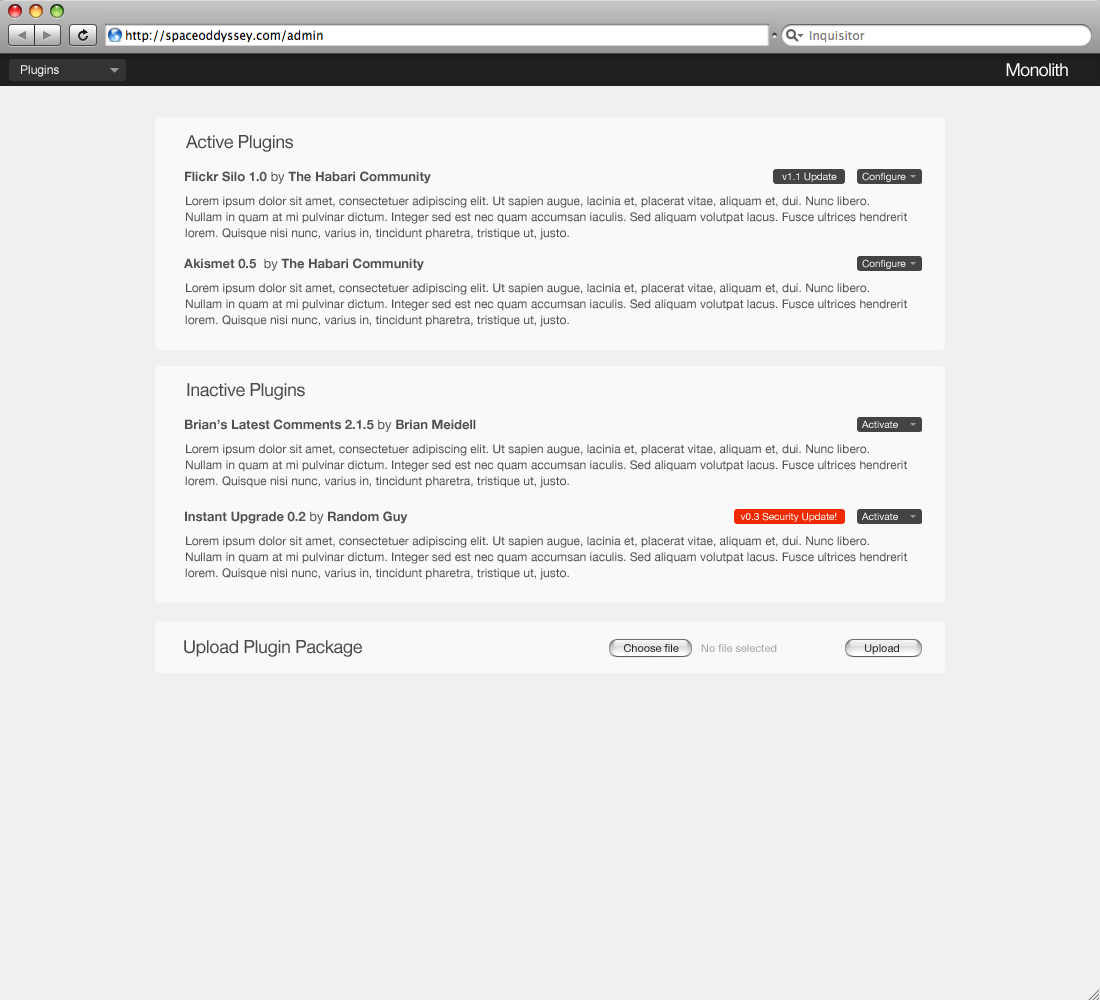
<style>
.page{position:relative;width:1100px;height:1000px;background:#f0f0f0}
.page>*{position:absolute;margin:0}
.t1{font:12px "ArialMT";color:#ffffff}
.t2{font:18px "HelveticaNeue";letter-spacing:-0.05em;color:#ffffff}
.t3{font:18px "HelveticaNeue";letter-spacing:-0.025em;color:#4a4a4a}
.t4{font:13px "HelveticaNeue-Bold";color:#525151}
.t5{font:13px "HelveticaNeue";color:#525151}
.t6{font:10px "HelveticaNeue";color:#ffffff}
.t7{font:12px/16px "HelveticaNeue";color:#525151}
.t8{font:11px "HelveticaNeue";color:#242424}
.t9{font:11px "HelveticaNeue";color:#a4a4a4}
</style>
<div class="page">
<p class="t1" style="left:21px;top:65px;width:38px;height:12px">Plugins</p>
<p class="t2" style="left:1006px;top:63px;width:62px;height:14px">Monolith</p>
<p class="t3" style="left:186px;top:135px;width:107px;height:17px">Active Plugins</p>
<p class="t4" style="left:185px;top:171px;width:246px;height:13px">Flickr Silo 1.0<span class="t5"> by </span>The Habari Community</p>
<p class="t6" style="left:782px;top:172px;width:55px;height:10px">v1.1 Update</p>
<p class="t6" style="left:862px;top:172px;width:44px;height:10px">Configure</p>
<p class="t7" style="left:185px;top:196px;width:722px;height:44px">Lorem ipsum dolor sit amet, consectetuer adipiscing elit. Ut sapien augue, lacinia et, placerat vitae, aliquam et, dui. Nunc libero. Nullam in quam at mi pulvinar dictum. Integer sed est nec quam accumsan iaculis. Sed aliquam volutpat lacus. Fusce ultrices hendrerit lorem. Quisque nisi nunc, varius in, tincidunt pharetra, tristique ut, justo.</p>
<p class="t4" style="left:184px;top:258px;width:240px;height:13px">Akismet 0.5<span class="t5">  by </span>The Habari Community</p>
<p class="t6" style="left:862px;top:259px;width:44px;height:10px">Configure</p>
<p class="t7" style="left:185px;top:283px;width:722px;height:44px">Lorem ipsum dolor sit amet, consectetuer adipiscing elit. Ut sapien augue, lacinia et, placerat vitae, aliquam et, dui. Nunc libero. Nullam in quam at mi pulvinar dictum. Integer sed est nec quam accumsan iaculis. Sed aliquam volutpat lacus. Fusce ultrices hendrerit lorem. Quisque nisi nunc, varius in, tincidunt pharetra, tristique ut, justo.</p>
<p class="t3" style="left:187px;top:383px;width:118px;height:17px">Inactive Plugins</p>
<p class="t4" style="left:185px;top:419px;width:291px;height:13px">Brian’s Latest Comments 2.1.5<span class="t5"> by </span>Brian Meidell</p>
<p class="t6" style="left:862px;top:420px;width:36px;height:8px">Activate</p>
<p class="t7" style="left:185px;top:444px;width:722px;height:44px">Lorem ipsum dolor sit amet, consectetuer adipiscing elit. Ut sapien augue, lacinia et, placerat vitae, aliquam et, dui. Nunc libero. Nullam in quam at mi pulvinar dictum. Integer sed est nec quam accumsan iaculis. Sed aliquam volutpat lacus. Fusce ultrices hendrerit lorem. Quisque nisi nunc, varius in, tincidunt pharetra, tristique ut, justo.</p>
<p class="t4" style="left:185px;top:511px;width:223px;height:13px">Instant Upgrade 0.2<span class="t5"> by </span>Random Guy</p>
<p class="t6" style="left:740px;top:512px;width:97px;height:10px">v0.3 Security Update!</p>
<p class="t6" style="left:862px;top:512px;width:36px;height:8px">Activate</p>
<p class="t7" style="left:185px;top:536px;width:722px;height:44px">Lorem ipsum dolor sit amet, consectetuer adipiscing elit. Ut sapien augue, lacinia et, placerat vitae, aliquam et, dui. Nunc libero. Nullam in quam at mi pulvinar dictum. Integer sed est nec quam accumsan iaculis. Sed aliquam volutpat lacus. Fusce ultrices hendrerit lorem. Quisque nisi nunc, varius in, tincidunt pharetra, tristique ut, justo.</p>
<p class="t3" style="left:184px;top:640px;width:178px;height:17px">Upload Plugin Package</p>
<p class="t8" style="left:624px;top:644px;width:55px;height:8px">Choose file</p>
<p class="t9" style="left:701px;top:644px;width:76px;height:8px">No file selected</p>
<p class="t8" style="left:865px;top:644px;width:34px;height:11px">Upload</p>
</div>
